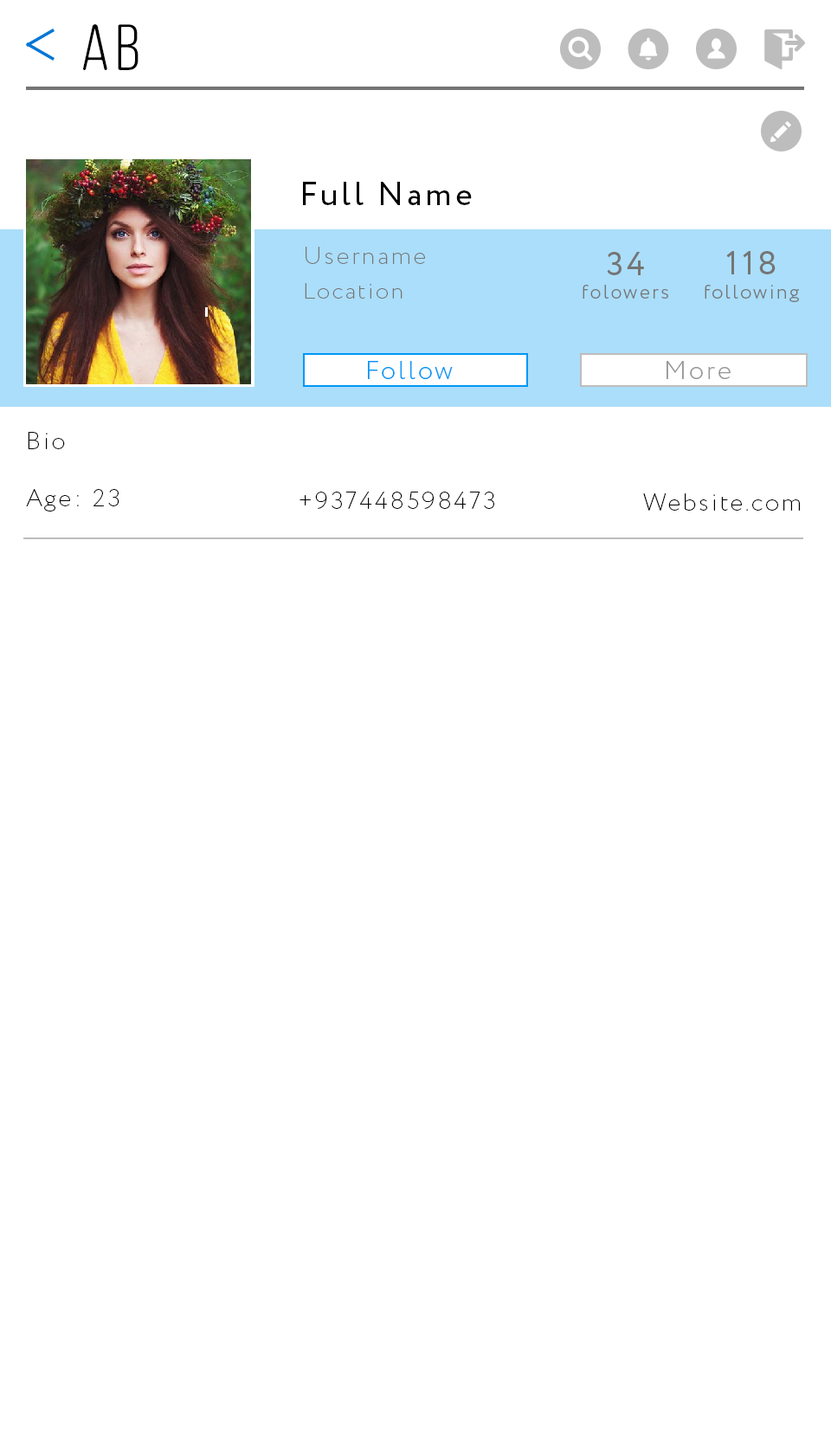
<style>
.page{position:relative;width:831px;height:1435px;background:#ffffff}
.page>*{position:absolute;margin:0}
.t1{font:65.4px "ClutchSans-Regular";letter-spacing:0.1em;color:#000000}
.t2{font:32.9px "Circe-Regular";letter-spacing:0.1em;color:#000000}
.t3{font:24.2px "Circe-ExtraLight";letter-spacing:0.1em;color:#757575}
.t4{font:19.9px "Circe-Light";letter-spacing:0.1em;color:#757575}
.t5{font:32.9px "Circe-Regular";letter-spacing:0.1em;color:#757575}
.t6{font:22.5px "Circe-ExtraLight";letter-spacing:0.1em;color:#747474}
.t7{font:26px "Circe-Light";letter-spacing:0.1em;color:#0096f5}
.t8{font:26px "Circe-Light";letter-spacing:0.1em;color:#979797}
.t9{font:24.2px "Circe-ExtraLight";letter-spacing:0.1em;color:#000000}
</style>
<div class="page">
<p class="t1" style="left:83px;top:24px;width:55px;height:46px">Ab</p>
<p class="t2" style="left:303px;top:182px;width:169px;height:23px">Full Name</p>
<p class="t3" style="left:306px;top:247px;width:119px;height:17px">Username</p>
<p class="t4" style="left:583px;top:252px;width:85px;height:47px;text-align:center"><span class="t5">34<br></span>folowers</p>
<p class="t4" style="left:705px;top:251px;width:94px;height:51px;text-align:center"><span class="t5">118<br></span>following</p>
<p class="t6" style="left:305px;top:283px;width:97px;height:16px">Location</p>
<p class="t7" style="left:368px;top:361px;width:85px;height:18px">Follow</p>
<p class="t8" style="left:666px;top:361px;width:65px;height:18px">More</p>
<p class="t9" style="left:28px;top:432px;width:37px;height:17px">Bio</p>
<p class="t9" style="left:26px;top:489px;width:93px;height:23px">Age: 23</p>
<p class="t9" style="left:299px;top:492px;width:195px;height:17px">+937448598473</p>
<p class="t9" style="left:643px;top:493px;width:157px;height:18px">Website.com</p>
</div>
